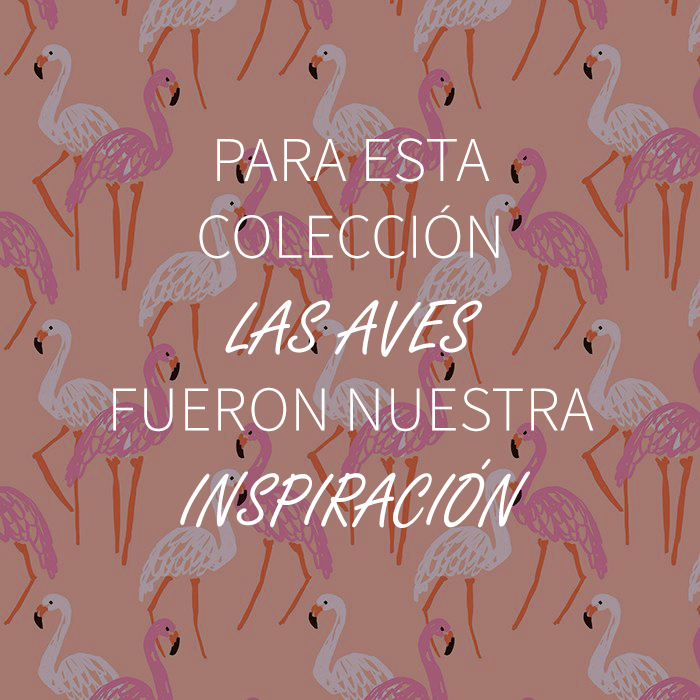
<style>
.page{position:relative;width:700px;height:700px;background:#a57870}
.page>*{position:absolute;margin:0}
.t1{font:64px "SourceSansPro-Light";color:#fefefe}
.t2{font:80px "FreestyleScript-Regular";color:#fefefe}
</style>
<div class="page">
<p class="t1" style="left:113px;top:138px;width:481px;height:390px;text-align:center">PARA ESTA COLECCIÓN<br><span class="t2">LAS AVES<br></span>FUERON NUESTRA <span class="t2">INSPIRACIÓN</span></p>
</div>
